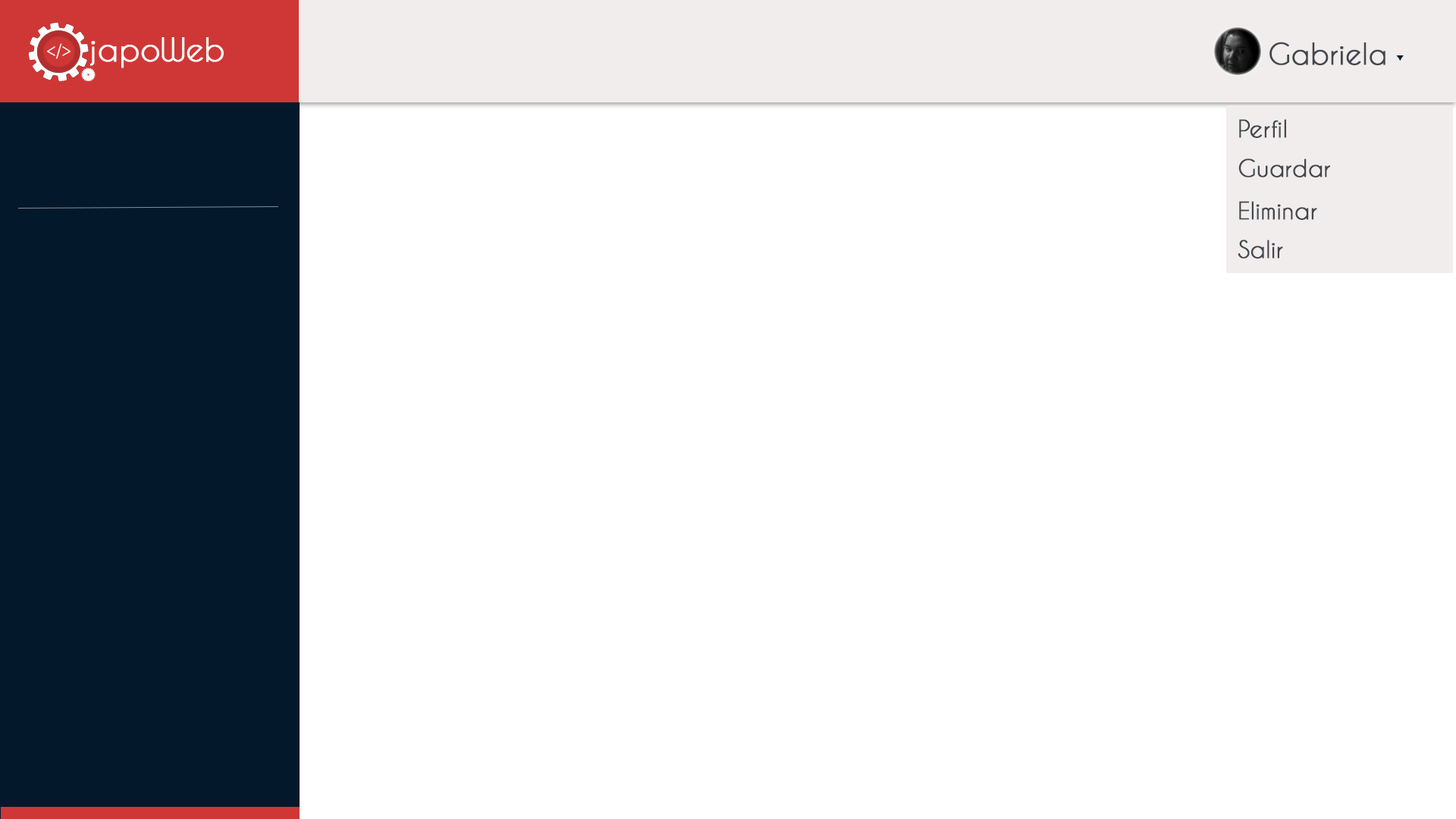
<style>
.page{position:relative;width:1456px;height:819px;background:#ffffff}
.page>*{position:absolute;margin:0}
.t1{font:31.1px "CaviarDreams";color:#ffffff;font-weight:bold}
.t2{font:28.1px "CaviarDreams";color:#42484d;font-weight:bold}
.t3{font:22.7px "CaviarDreams";color:#42484d;font-weight:bold}
</style>
<div class="page">
<p class="t1" style="left:89px;top:37px;width:135px;height:31px">japoWeb</p>
<p class="t2" style="left:1269px;top:42px;width:116px;height:24px">Gabriela</p>
<p class="t3" style="left:1239px;top:119px;width:47px;height:19px">Perfil</p>
<p class="t3" style="left:1238px;top:158px;width:92px;height:19px">Guardar</p>
<p class="t3" style="left:1239px;top:201px;width:78px;height:19px">Eliminar</p>
<p class="t3" style="left:1238px;top:240px;width:45px;height:19px">Salir</p>
</div>
